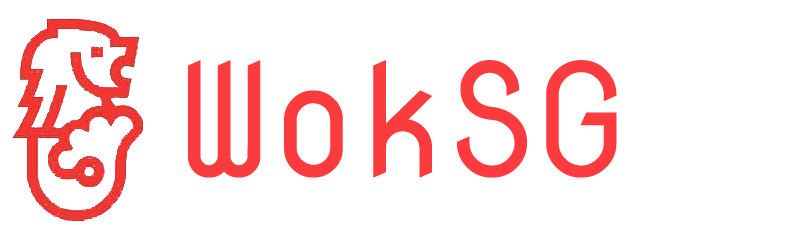
<style>
.page{position:relative;width:800px;height:240px;background:#ffffff}
.page>*{position:absolute;margin:0}
.t1{font:159px "NovaMono";color:#fc3b3e}
</style>
<div class="page">
<p class="t1" style="left:188px;top:60px;width:429px;height:118px">WokSG</p>
</div>
